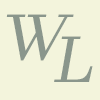
<style>
.page{position:relative;width:100px;height:100px;background:#f3f4dc}
.page>*{position:absolute;margin:0}
.t1{font:64px "JavaneseText";color:#8a968c;font-style:italic}
</style>
<div class="page">
<p class="t1" style="left:6px;top:14px;width:68px;height:47px">W</p>
<p class="t1" style="left:54px;top:36px;width:39px;height:46px">L</p>
</div>
